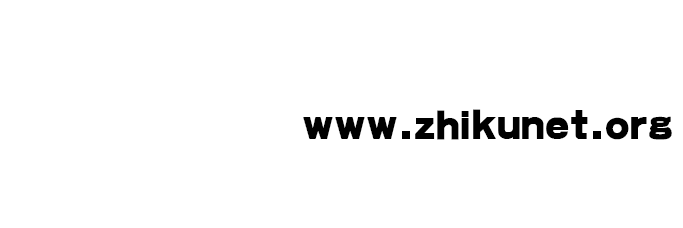
<style>
.page{position:relative;width:683px;height:228px;background:#ffffff}
.page>*{position:absolute;margin:0}
.t1{font:33.3px "JFangDie";color:#000000}
</style>
<div class="page">
<p class="t1" style="left:303px;top:109px;width:369px;height:31px">www.zhikunet.org</p>
</div>
